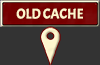
<style>
.page{position:relative;width:100px;height:65px;background:#333333}
.page>*{position:absolute;margin:0}
.t1{font:13.9px "Acme-Regular";color:#fff6cd}
</style>
<div class="page">
<p class="t1" style="left:16px;top:8px;width:67px;height:11px">OLD CACHE</p>
</div>
